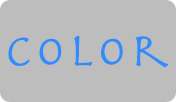
<style>
.page{position:relative;width:176px;height:102px;background:#bdbdbd}
.page>*{position:absolute;margin:0}
.t1{font:48.1px "Herculanum";letter-spacing:0.065em;color:#308bfc}
</style>
<div class="page">
<p class="t1" style="left:8px;top:35px;width:161px;height:33px">Color</p>
</div>
